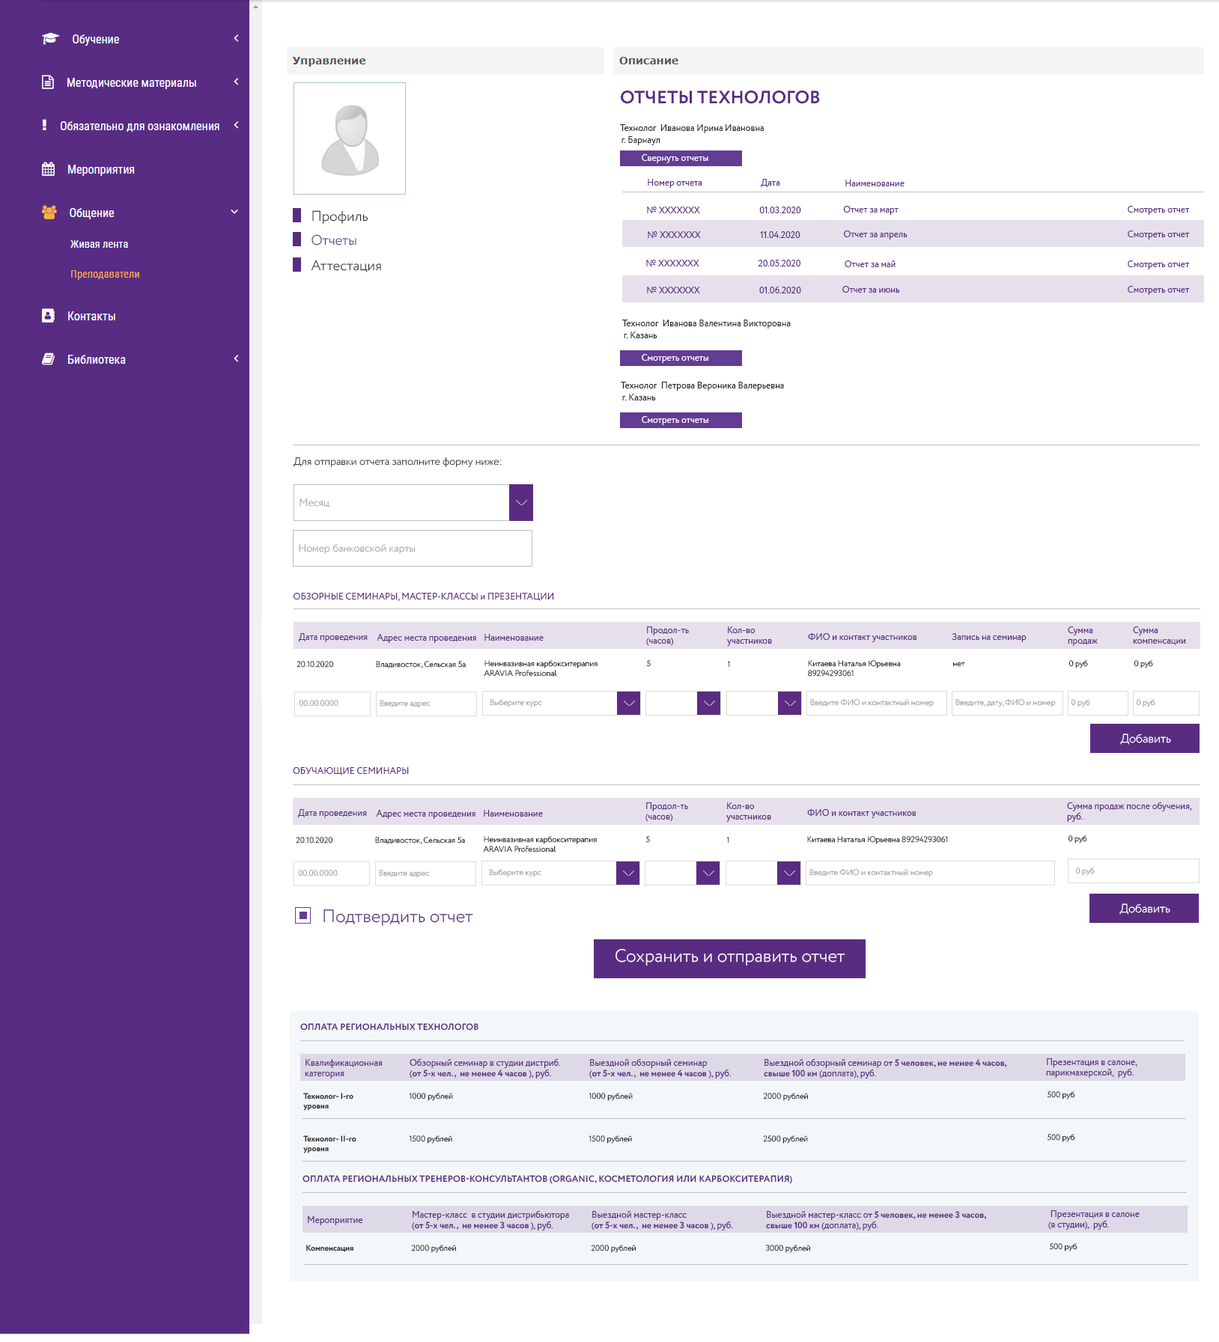
<style>
.page{position:relative;width:1219px;height:1342px;background:#ffffff}
.page>*{position:absolute;margin:0}
.t1{font:18px "Circe-Bold";color:#592c82;text-transform:uppercase}
.t2{font:9px "Circe-Regular";color:#272727}
.t3{font:9px "Circe-Regular";color:#ffffff}
.t4{font:9px "Circe-Regular";color:#592c81}
.t5{font:14px "Circe-Light";color:#272727}
.t6{font:14px "Circe-Light";color:#592c82}
.t7{font:10.5px "Circe-Light";color:#2c2c2c}
.t8{font:10.5px "Circe-Light";color:#a3a3a3}
.t9{font:8px "Circe-Light";color:#272727}
.t10{font:8px "Circe-Light"}
.t11{font:8px "Circe-Light";color:#a3a3a3}
.t12{font:12px "Circe-Light";color:#ffffff}
.t13{font:18px "Circe-Light";color:#592c82}
.t14{font:18px "Circe-Light";color:#ffffff}
.t15{font:9px "Circe-Bold";color:#592c81;text-transform:uppercase}
.t16{font:9px "Circe-Bold";color:#592c81}
.t17{font:8px "Circe-Bold";color:#272727}
</style>
<div class="page">
<p class="t1" style="left:621px;top:91px;width:199px;height:13px">Отчеты технологов</p>
<p class="t2" style="left:620px;top:124px;width:144px;height:9px">Технолог  Иванова Ирина Ивановна</p>
<p class="t2" style="left:621px;top:136px;width:39px;height:9px">г. Барнаул</p>
<p class="t3" style="left:642px;top:154px;width:66px;height:9px">Свернуть отчеты</p>
<p class="t4" style="left:648px;top:179px;width:54px;height:9px">Номер отчета</p>
<p class="t4" style="left:761px;top:179px;width:19px;height:8px">Дата</p>
<p class="t4" style="left:845px;top:180px;width:59px;height:6px">Наименование</p>
<p class="t4" style="left:647px;top:207px;width:53px;height:6px">№ ХХХХХХХ</p>
<p class="t4" style="left:759px;top:207px;width:42px;height:6px">01.03.2020</p>
<p class="t4" style="left:843px;top:206px;width:55px;height:9px">Отчет за март</p>
<p class="t4" style="left:1127px;top:206px;width:63px;height:9px">Смотреть отчет</p>
<p class="t5" style="left:312px;top:210px;width:56px;height:14px">Профиль</p>
<p class="t4" style="left:648px;top:231px;width:53px;height:7px">№ ХХХХХХХ</p>
<p class="t4" style="left:760px;top:231px;width:40px;height:7px">11.04.2020</p>
<p class="t4" style="left:844px;top:231px;width:63px;height:9px">Отчет за апрель</p>
<p class="t4" style="left:1127px;top:231px;width:63px;height:9px">Смотреть отчет</p>
<p class="t6" style="left:311px;top:234px;width:45px;height:12px">Отчеты</p>
<p class="t5" style="left:311px;top:260px;width:70px;height:13px">Аттестация</p>
<p class="t4" style="left:646px;top:260px;width:53px;height:7px">№ ХХХХХХХ</p>
<p class="t4" style="left:758px;top:260px;width:42px;height:7px">20.05.2020</p>
<p class="t4" style="left:844px;top:261px;width:51px;height:6px">Отчет за май</p>
<p class="t4" style="left:1127px;top:261px;width:63px;height:9px">Смотреть отчет</p>
<p class="t4" style="left:647px;top:287px;width:53px;height:6px">№ ХХХХХХХ</p>
<p class="t4" style="left:759px;top:286px;width:42px;height:7px">01.06.2020</p>
<p class="t4" style="left:842px;top:286px;width:58px;height:7px">Отчет за июнь</p>
<p class="t4" style="left:1127px;top:286px;width:63px;height:9px">Смотреть отчет</p>
<p class="t2" style="left:622px;top:320px;width:169px;height:9px">Технолог  Иванова Валентина Викторовна</p>
<p class="t2" style="left:624px;top:332px;width:33px;height:6px">г. Казань</p>
<p class="t3" style="left:642px;top:354px;width:66px;height:9px">Смотреть отчеты</p>
<p class="t2" style="left:621px;top:382px;width:163px;height:9px">Технолог  Петрова Вероника Валерьевна</p>
<p class="t2" style="left:622px;top:394px;width:34px;height:7px">г. Казань</p>
<p class="t3" style="left:642px;top:416px;width:66px;height:9px">Смотреть отчеты</p>
<p class="t7" style="left:293px;top:457px;width:209px;height:10px">Для отправки отчета заполните форму ниже:</p>
<p class="t8" style="left:299px;top:499px;width:30px;height:9px">Месяц</p>
<p class="t8" style="left:299px;top:544px;width:117px;height:10px">Номер банковской карты</p>
<p class="t4" style="left:293px;top:593px;width:261px;height:8px">ОБЗОРНЫЕ СЕМИНАРЫ, МАСТЕР-КЛАССЫ и ПРЕЗЕНТАЦИИ</p>
<p class="t4" style="left:646px;top:627px;width:43px;height:19px">Продол-ть <br>(часов)</p>
<p class="t4" style="left:727px;top:627px;width:45px;height:19px">Кол-во <br>участников</p>
<p class="t4" style="left:1068px;top:627px;width:30px;height:19px">Сумма <br>продаж</p>
<p class="t4" style="left:1133px;top:627px;width:53px;height:18px">Сумма <br>компенсации</p>
<p class="t4" style="left:299px;top:633px;width:69px;height:9px">Дата проведения</p>
<p class="t4" style="left:377px;top:634px;width:99px;height:9px">Адрес места проведения</p>
<p class="t4" style="left:484px;top:634px;width:60px;height:7px">Наименование</p>
<p class="t4" style="left:808px;top:633px;width:109px;height:9px">ФИО и контакт участников</p>
<p class="t4" style="left:952px;top:633px;width:74px;height:9px">Запись на семинар</p>
<p class="t9" style="left:296px;top:661px;width:37px;height:7px">20.10.2020</p>
<p class="t9" style="left:376px;top:661px;width:90px;height:8px">Владивосток, Сельская 5а</p>
<p class="t9" style="left:484px;top:660px;width:113px;height:17px">Неинвазивная карбокситерапия <br>ARAVIA Professional</p>
<p class="t10" style="left:646px;top:660px;width:5px;height:7px">5</p>
<p class="t10" style="left:727px;top:661px;width:3px;height:7px">1</p>
<p class="t9" style="left:808px;top:660px;width:93px;height:17px">Китаева Наталья Юрьевна 89294293061</p>
<p class="t9" style="left:953px;top:662px;width:12px;height:5px">нет</p>
<p class="t9" style="left:1069px;top:660px;width:19px;height:9px">0 руб</p>
<p class="t9" style="left:1134px;top:660px;width:19px;height:9px">0 руб</p>
<p class="t11" style="left:299px;top:700px;width:39px;height:7px">00.00.0000</p>
<p class="t11" style="left:380px;top:700px;width:50px;height:8px">Введите адрес</p>
<p class="t11" style="left:490px;top:699px;width:52px;height:8px">Выберите курс</p>
<p class="t11" style="left:810px;top:699px;width:124px;height:8px">Введите ФИО и контактный номер</p>
<p class="t11" style="left:955px;top:699px;width:101px;height:8px">Введите, дату, ФИО и номер</p>
<p class="t11" style="left:1071px;top:699px;width:19px;height:8px">0 руб</p>
<p class="t11" style="left:1136px;top:699px;width:19px;height:8px">0 руб</p>
<p class="t12" style="left:1120px;top:734px;width:51px;height:11px">Добавить</p>
<p class="t4" style="left:293px;top:767px;width:116px;height:9px">ОБУЧАЮЩИЕ СЕМИНАРЫ</p>
<p class="t4" style="left:298px;top:809px;width:69px;height:9px">Дата проведения</p>
<p class="t4" style="left:645px;top:803px;width:43px;height:19px">Продол-ть <br>(часов)</p>
<p class="t4" style="left:726px;top:803px;width:45px;height:19px">Кол-во <br>участников</p>
<p class="t4" style="left:807px;top:809px;width:109px;height:9px">ФИО и контакт участников</p>
<p class="t4" style="left:1067px;top:802px;width:125px;height:20px">Сумма продаж после обучения, <br>руб.</p>
<p class="t4" style="left:376px;top:810px;width:99px;height:9px">Адрес места проведения</p>
<p class="t4" style="left:484px;top:810px;width:59px;height:7px">Наименование</p>
<p class="t9" style="left:296px;top:837px;width:36px;height:7px">20.10.2020</p>
<p class="t9" style="left:375px;top:837px;width:90px;height:7px">Владивосток, Сельская 5а</p>
<p class="t9" style="left:483px;top:836px;width:114px;height:17px">Неинвазивная карбокситерапия <br>ARAVIA Professional</p>
<p class="t10" style="left:645px;top:836px;width:5px;height:7px">5</p>
<p class="t10" style="left:726px;top:837px;width:3px;height:7px">1</p>
<p class="t9" style="left:807px;top:836px;width:141px;height:8px">Китаева Наталья Юрьевна 89294293061</p>
<p class="t9" style="left:1068px;top:835px;width:19px;height:9px">0 руб</p>
<p class="t11" style="left:298px;top:870px;width:40px;height:7px">00.00.0000</p>
<p class="t11" style="left:379px;top:870px;width:51px;height:8px">Введите адрес</p>
<p class="t11" style="left:489px;top:869px;width:52px;height:8px">Выберите курс</p>
<p class="t11" style="left:809px;top:869px;width:124px;height:8px">Введите ФИО и контактный номер</p>
<p class="t11" style="left:1076px;top:868px;width:19px;height:8px">0 руб</p>
<p class="t12" style="left:1119px;top:904px;width:51px;height:11px">Добавить</p>
<p class="t13" style="left:323px;top:910px;width:150px;height:16px">Подтвердить отчет</p>
<p class="t14" style="left:615px;top:949px;width:230px;height:17px">Сохранить и отправить отчет</p>
<p class="t15" style="left:300px;top:1023px;width:178px;height:8px">Оплата региональных ТЕХНОЛОГОВ</p>
<p class="t4" style="left:305px;top:1059px;width:77px;height:20px">Квалификационная<br>категория</p>
<p class="t4" style="left:410px;top:1059px;width:151px;height:20px">Обзорный семинар в студии дистриб.  <br>(<span class="t16">от 5-х чел.,  не менее 4 часов</span> ), руб.</p>
<p class="t16" style="left:589px;top:1059px;width:142px;height:20px"><span class="t4">Выездной обзорный семинар <br>(</span>от 5-х чел.,  не менее 4 часов<span class="t4"> ), руб.</span></p>
<p class="t16" style="left:764px;top:1059px;width:243px;height:20px"><span class="t4">Выездной обзорный семинар о</span>т 5 человек, не менее 4 часов,  <br>свыше 100 км<span class="t4"> (доплата), руб.</span></p>
<p class="t4" style="left:1046px;top:1059px;width:91px;height:19px">Презентация в салоне, <br>парикмахерской,  руб.</p>
<p class="t17" style="left:303px;top:1093px;width:50px;height:18px">Технолог- I-го уровня</p>
<p class="t9" style="left:409px;top:1093px;width:44px;height:8px">1000 рублей</p>
<p class="t9" style="left:588px;top:1093px;width:45px;height:8px">1000 рублей</p>
<p class="t9" style="left:763px;top:1093px;width:45px;height:8px">2000 рублей</p>
<p class="t9" style="left:1047px;top:1092px;width:28px;height:8px">500 руб</p>
<p class="t17" style="left:303px;top:1136px;width:53px;height:18px">Технолог- II-го уровня</p>
<p class="t9" style="left:409px;top:1136px;width:43px;height:8px">1500 рублей</p>
<p class="t9" style="left:588px;top:1136px;width:44px;height:8px">1500 рублей</p>
<p class="t9" style="left:763px;top:1136px;width:45px;height:8px">2500 рублей</p>
<p class="t9" style="left:1047px;top:1134px;width:28px;height:8px">500 руб</p>
<p class="t15" style="left:302px;top:1175px;width:490px;height:9px">Оплата региональных ТРЕНЕРОВ-КОНСУЛЬТАНТОВ (Organic, косметология или карбокситерапия)</p>
<p class="t4" style="left:308px;top:1217px;width:55px;height:9px">Мероприятие</p>
<p class="t4" style="left:412px;top:1211px;width:157px;height:20px">Мастер-класс  в студии дистрибьютора <br>(<span class="t16">от 5-х чел.,  не менее 3 часов </span>), руб.</p>
<p class="t16" style="left:591px;top:1211px;width:142px;height:20px"><span class="t4">Выездной мастер-класс<br>(</span>от 5-х чел.,  не менее 3 часов<span class="t4"> ), руб.</span></p>
<p class="t16" style="left:766px;top:1211px;width:220px;height:20px"><span class="t4">Выездной мастер-класс о</span>т 5 человек, не менее 3 часов,  <br>свыше 100 км<span class="t4"> (доплата), руб.</span></p>
<p class="t4" style="left:1048px;top:1211px;width:91px;height:19px">Презентация в салоне <br>(в студии),  руб.</p>
<p class="t17" style="left:306px;top:1245px;width:47px;height:7px">Компенсация</p>
<p class="t9" style="left:411px;top:1245px;width:45px;height:8px">2000 рублей</p>
<p class="t9" style="left:591px;top:1245px;width:45px;height:8px">2000 рублей</p>
<p class="t9" style="left:765px;top:1245px;width:45px;height:8px">3000 рублей</p>
<p class="t9" style="left:1049px;top:1244px;width:28px;height:8px">500 руб</p>
</div>
